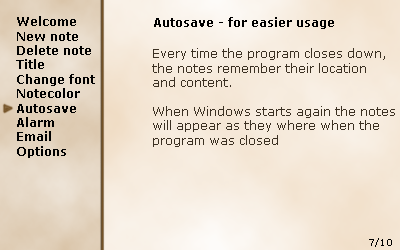
<style>
.page{position:relative;width:400px;height:250px}
.page>*{position:absolute;margin:0}
.t1{font:12px "Verdana-Bold";color:#010101}
.t2{font:12px "Verdana-Bold";color:#000000}
.t3{font:12px "Verdana";color:#3b3022}
.t4{font:9px "Verdana";color:#000000}
</style>
<div class="page">
<p class="t1" style="left:16px;top:16px;width:79px;height:142px">Welcome<br>New note<br>Delete note<br>Title<br>Change font<br>Notecolor<br>Autosave<br>Alarm<br>Email<br>Options</p>
<p class="t2" style="left:154px;top:17px;width:180px;height:12px">Autosave - for easier usage</p>
<p class="t3" style="left:152px;top:48px;width:243px;height:99px">Every time the program closes down,<br>the notes remember their location<br>and content.<br><br>When Windows starts again the notes will appear as they where when the program was closed</p>
<p class="t4" style="left:369px;top:238px;width:23px;height:9px">7/10</p>
</div>
